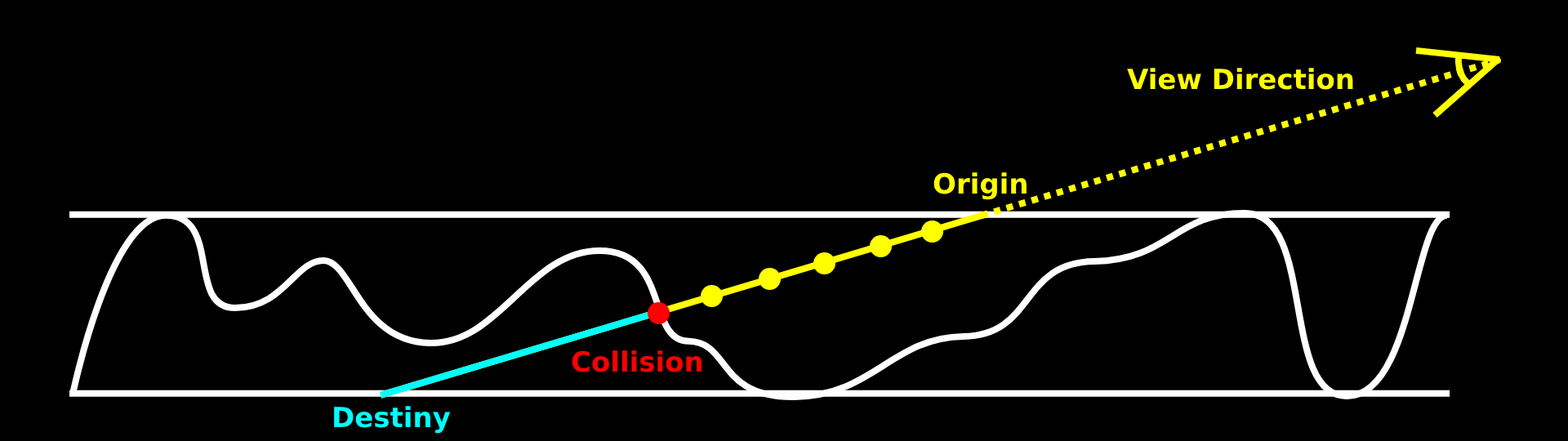
<style>
.page{position:relative;width:1568px;height:441px;background:#000000}
.page>*{position:absolute;margin:0}
.t1{font:27.8px "DejaVuSans-Bold";color:#ffff00}
.t2{font:27.8px "DejaVuSans-Bold";color:#ff0000}
.t3{font:27.8px "DejaVuSans-Bold";color:#00ffff}
</style>
<div class="page">
<p class="t1" style="left:1127px;top:68px;width:226px;height:22px">View Direction</p>
<p class="t1" style="left:933px;top:172px;width:94px;height:28px">Origin</p>
<p class="t2" style="left:572px;top:350px;width:130px;height:22px">Collision</p>
<p class="t3" style="left:334px;top:406px;width:117px;height:28px">Destiny</p>
</div>
